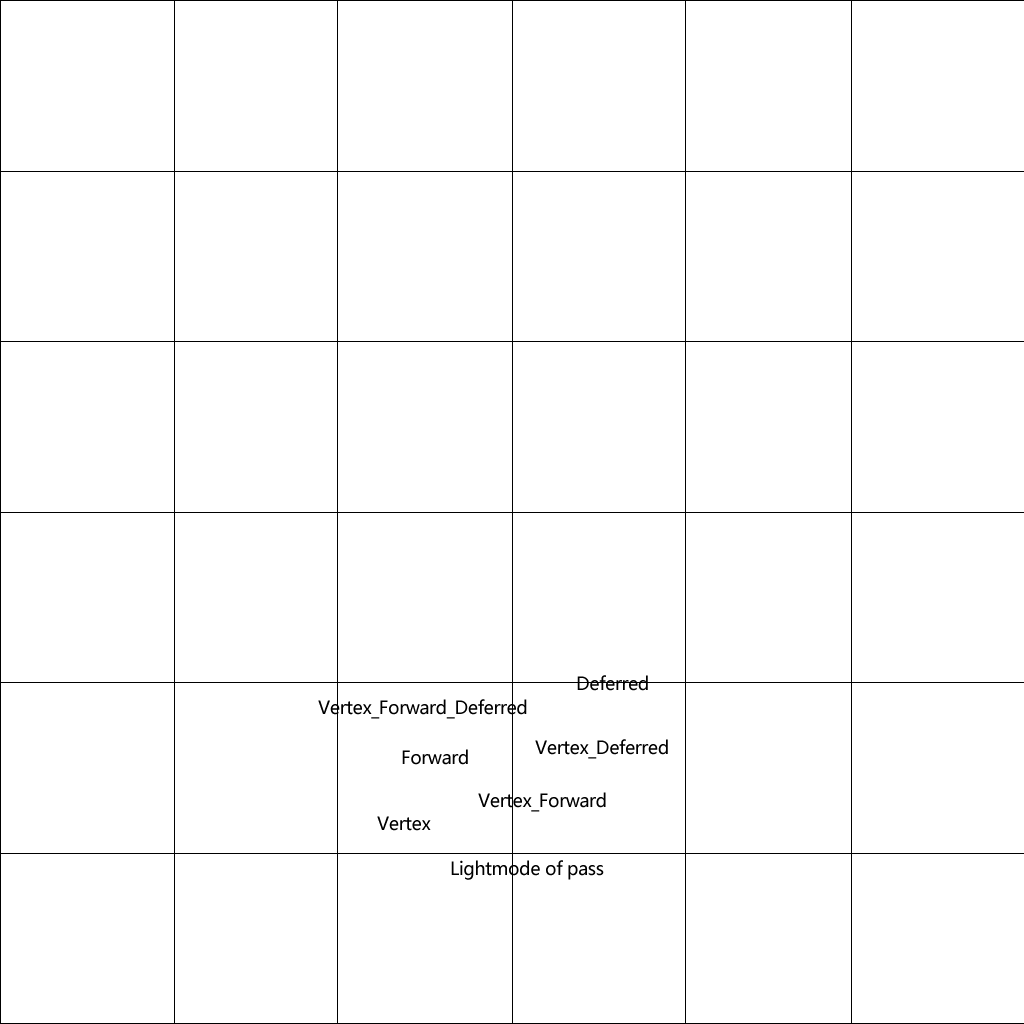
<style>
.page{position:relative;width:1024px;height:1024px;background:#ffffff}
.page>*{position:absolute;margin:0}
.t1{font:18px "MicrosoftYaHei";letter-spacing:-0.02em;color:#000000}
</style>
<div class="page">
<p class="t1" style="left:577px;top:675px;width:71px;height:16px">Deferred</p>
<p class="t1" style="left:318px;top:699px;width:209px;height:20px">Vertex_Forward_Deferred</p>
<p class="t1" style="left:402px;top:749px;width:66px;height:16px">Forward</p>
<p class="t1" style="left:535px;top:739px;width:133px;height:20px">Vertex_Deferred</p>
<p class="t1" style="left:478px;top:792px;width:128px;height:20px">Vertex_Forward</p>
<p class="t1" style="left:377px;top:816px;width:54px;height:15px">Vertex</p>
<p class="t1" style="left:451px;top:860px;width:153px;height:20px">Lightmode of pass</p>
</div>
